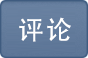
<style>
.page{position:relative;width:88px;height:58px}
.page>*{position:absolute;margin:0}
.t1{font:25.8px "STHeiti";letter-spacing:0.1em;color:#ffffff}
</style>
<div class="page">
<p class="t1" style="left:19px;top:17px;width:52px;height:25px">评论</p>
</div>
